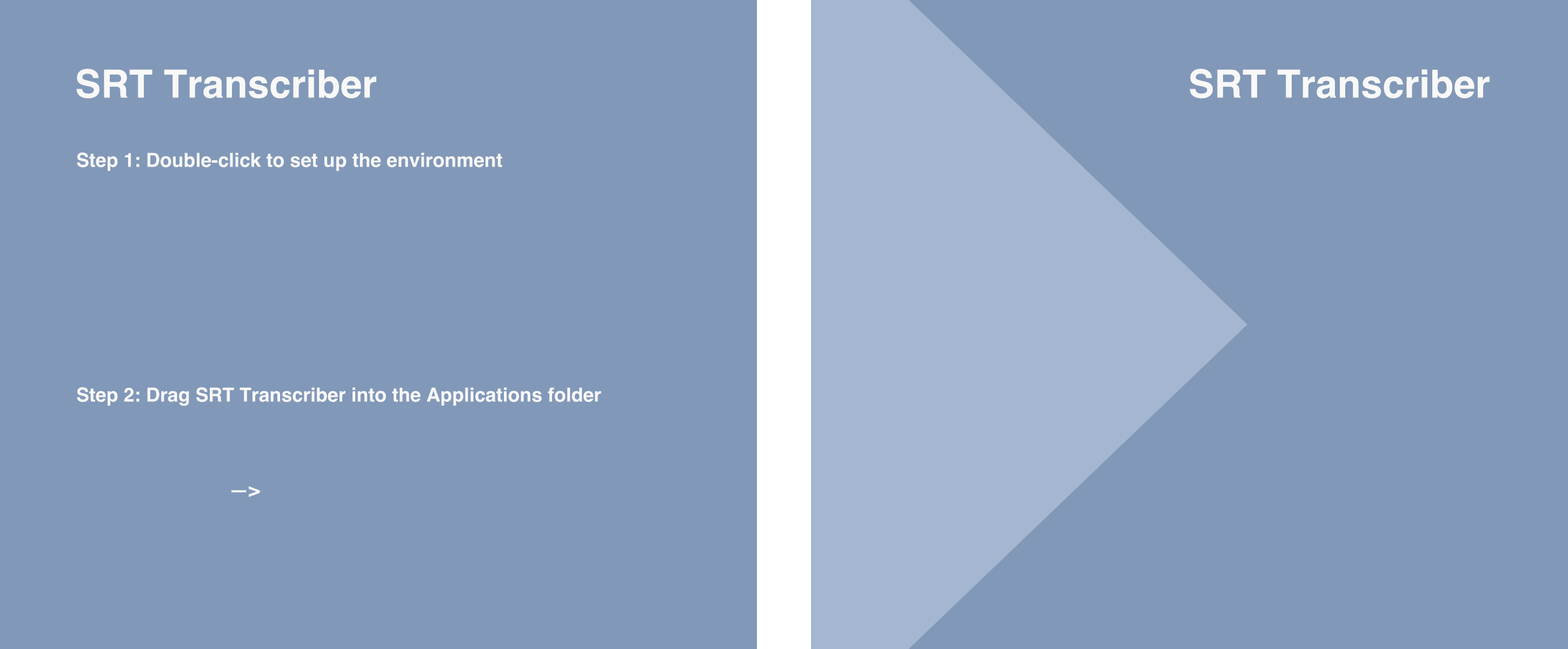
<style>
.page{position:relative;width:1568px;height:649px;background:#8198b8}
.page>*{position:absolute;margin:0}
.t1{font:38.8px "Helvetica-Bold";color:#f8f8f8}
.t2{font:19.3px "Helvetica-Bold";color:#f8f8f8}
</style>
<div class="page">
<p class="t1" style="left:76px;top:69px;width:300px;height:29px">SRT Transcriber</p>
<p class="t1" style="left:1190px;top:69px;width:300px;height:29px">SRT Transcriber</p>
<p class="t2" style="left:77px;top:152px;width:425px;height:19px">Step 1: Double-click to set up the environment</p>
<p class="t2" style="left:77px;top:387px;width:524px;height:19px">Step 2: Drag SRT Transcriber into the Applications folder</p>
<p class="t2" style="left:231px;top:486px;width:29px;height:11px">—&gt;</p>
</div>
